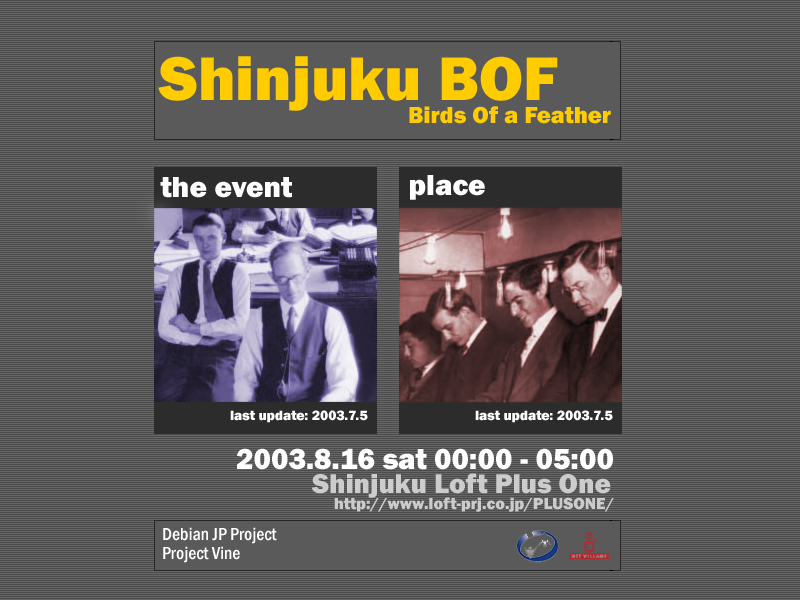
<style>
.page{position:relative;width:800px;height:600px;background:#4c4c4c}
.page>*{position:absolute;margin:0}
.t1{font:63.8px "FranklinGothic-Heavy";color:#ffcc00}
.t2{font:23.9px "FranklinGothic-Heavy";color:#ffcc00}
.t3{font:29.9px "FranklinGothic-Heavy";color:#ffffff}
.t4{font:13.9px "FranklinGothic-Heavy";color:#ffffff}
.t5{font:27.9px "FranklinGothic-Heavy";color:#cccccc}
.t6{font:16.6px "FranklinGothic-Heavy";color:#cccccc}
.t7{font:17.9px "FranklinGothic-MediumCond";color:#ffffff}
</style>
<div class="page">
<p class="t1" style="left:158px;top:56px;width:400px;height:55px">Shinjuku BOF</p>
<p class="t2" style="left:409px;top:106px;width:202px;height:18px">Birds Of a Feather</p>
<p class="t3" style="left:160px;top:177px;width:132px;height:21px">the event</p>
<p class="t3" style="left:410px;top:175px;width:75px;height:25px">place</p>
<p class="t4" style="left:230px;top:410px;width:138px;height:13px">last update: 2003.7.5</p>
<p class="t4" style="left:475px;top:410px;width:138px;height:13px">last update: 2003.7.5</p>
<p class="t3" style="left:237px;top:448px;width:376px;height:22px">2003.8.16 sat 00:00 - 05:00</p>
<p class="t5" style="left:311px;top:473px;width:300px;height:25px">Shinjuku Loft Plus One</p>
<p class="t6" style="left:334px;top:497px;width:280px;height:15px">http://www.loft-prj.co.jp/PLUSONE/</p>
<p class="t7" style="left:163px;top:527px;width:114px;height:17px">Debian JP Project</p>
<p class="t7" style="left:163px;top:546px;width:77px;height:17px">Project Vine</p>
</div>
